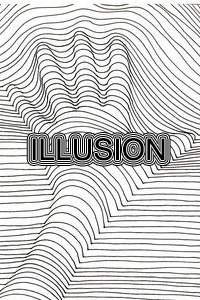
<style>
.page{position:relative;width:200px;height:300px}
.page>*{position:absolute;margin:0}
.t1{font:30px "MicrosoftSansSerif";color:#000000}
</style>
<div class="page">
<p class="t1" style="left:32px;top:138px;width:133px;height:23px">ILLUSION</p>
</div>
